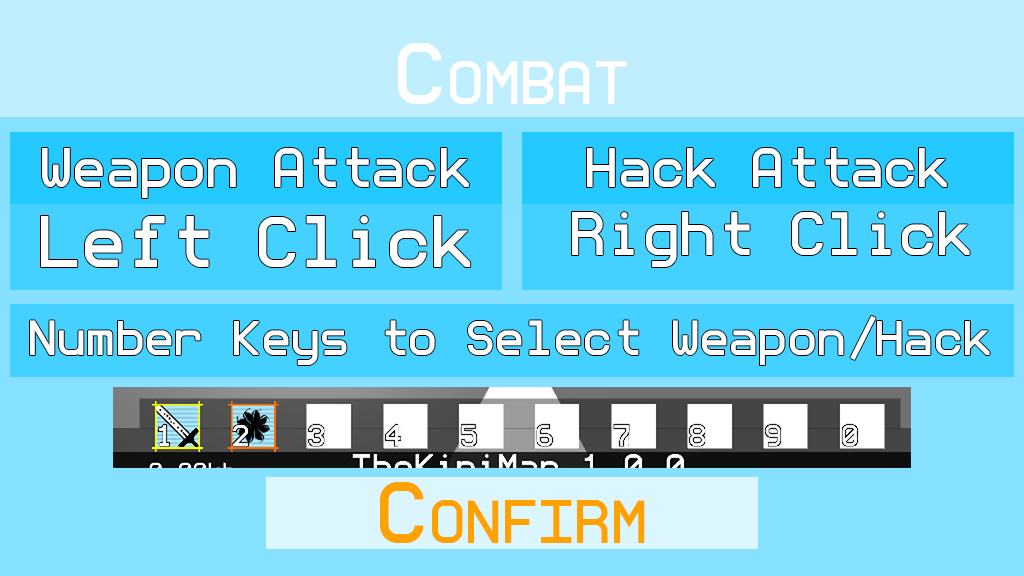
<style>
.page{position:relative;width:1024px;height:576px;background:#85e1ff}
.page>*{position:absolute;margin:0}
.t1{font:77.9px "monoMMM5-Regular";color:#ffffff;font-variant:small-caps}
.t2{font:50px "monoMMM5-Regular";color:#ffffff}
.t3{font:65.4px "monoMMM5-Regular";color:#ffffff}
.t4{font:55px "monoMMM5-Regular";color:#ffffff}
.t5{font:44.1px "monoMMM5-Regular";color:#ffffff}
.t6{font:77.9px "monoMMM5-Regular";color:#ffa200;font-variant:small-caps}
</style>
<div class="page">
<p class="t1" style="left:398px;top:43px;width:229px;height:61px">Combat</p>
<p class="t2" style="left:42px;top:148px;width:427px;height:50px">Weapon Attack</p>
<p class="t2" style="left:587px;top:148px;width:360px;height:39px">Hack Attack</p>
<p class="t3" style="left:41px;top:216px;width:430px;height:51px">Left Click</p>
<p class="t4" style="left:572px;top:212px;width:398px;height:55px">Right Click</p>
<p class="t5" style="left:30px;top:315px;width:960px;height:50px">Number Keys to Select Weapon/Hack</p>
<p class="t6" style="left:380px;top:482px;width:265px;height:61px">Confirm</p>
</div>
